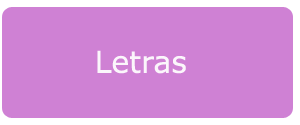
<style>
.page{position:relative;width:300px;height:125px;background:#cf81d4}
.page>*{position:absolute;margin:0}
.t1{font:30px "Verdana";color:#fbf6fb}
</style>
<div class="page">
<p class="t1" style="left:97px;top:50px;width:89px;height:24px">Letras</p>
</div>
